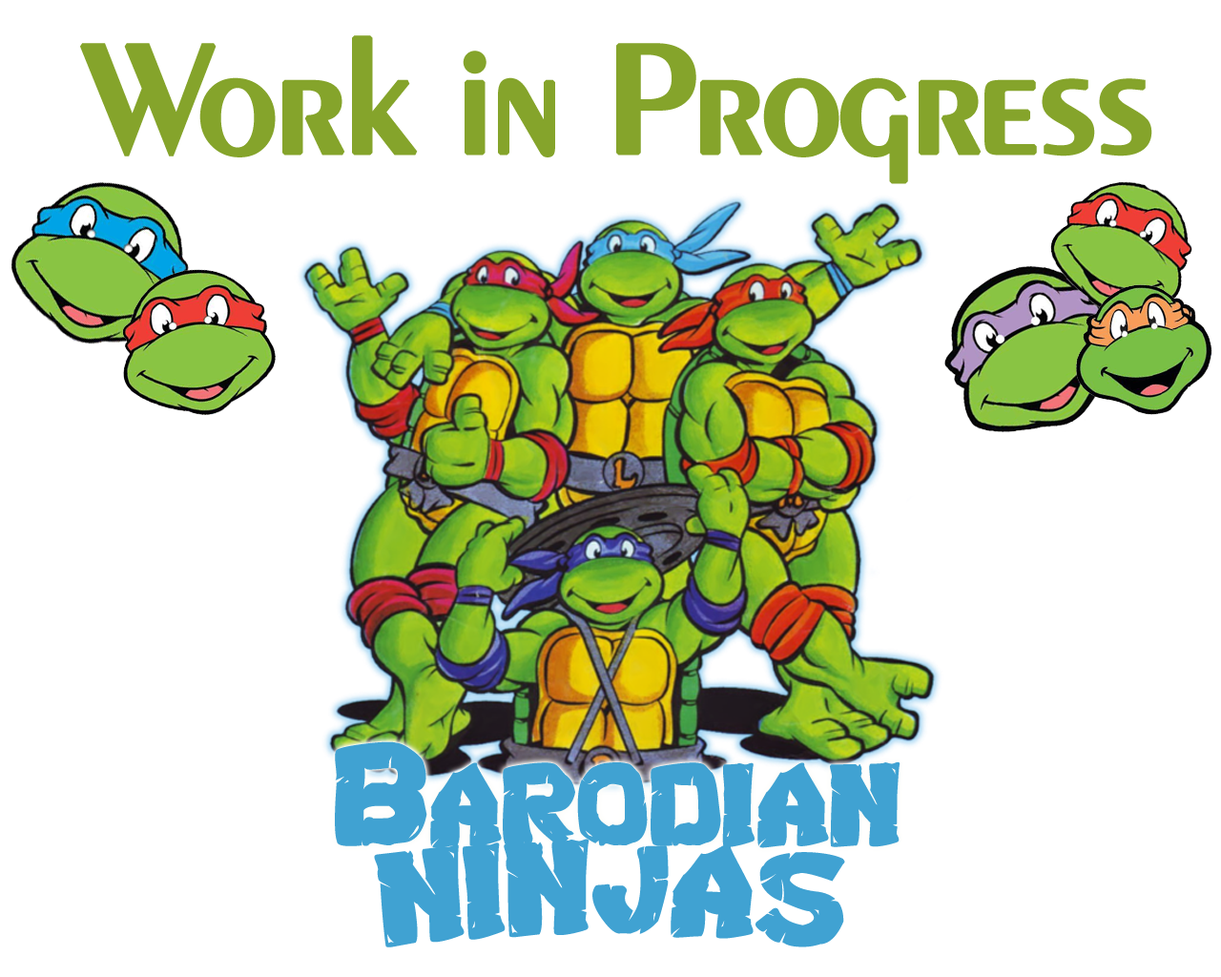
<style>
.page{position:relative;width:1221px;height:977px;background:#ffffff}
.page>*{position:absolute;margin:0}
.t1{font:164.1px "Exotic350BT-DemiBold";letter-spacing:-0.05em;color:#85a42b;font-weight:bold}
.t2{font:143.1px "Turtles";letter-spacing:-0.005em;color:#40a2d2}
.t3{font:162.1px "Turtles";letter-spacing:-0.005em;color:#40a2d2}
</style>
<div class="page">
<p class="t1" style="left:80px;top:35px;width:1072px;height:149px">Work in Progress</p>
<p class="t2" style="left:335px;top:741px;width:565px;height:107px">Barodian</p>
<p class="t3" style="left:374px;top:838px;width:471px;height:109px">ninjas</p>
</div>
